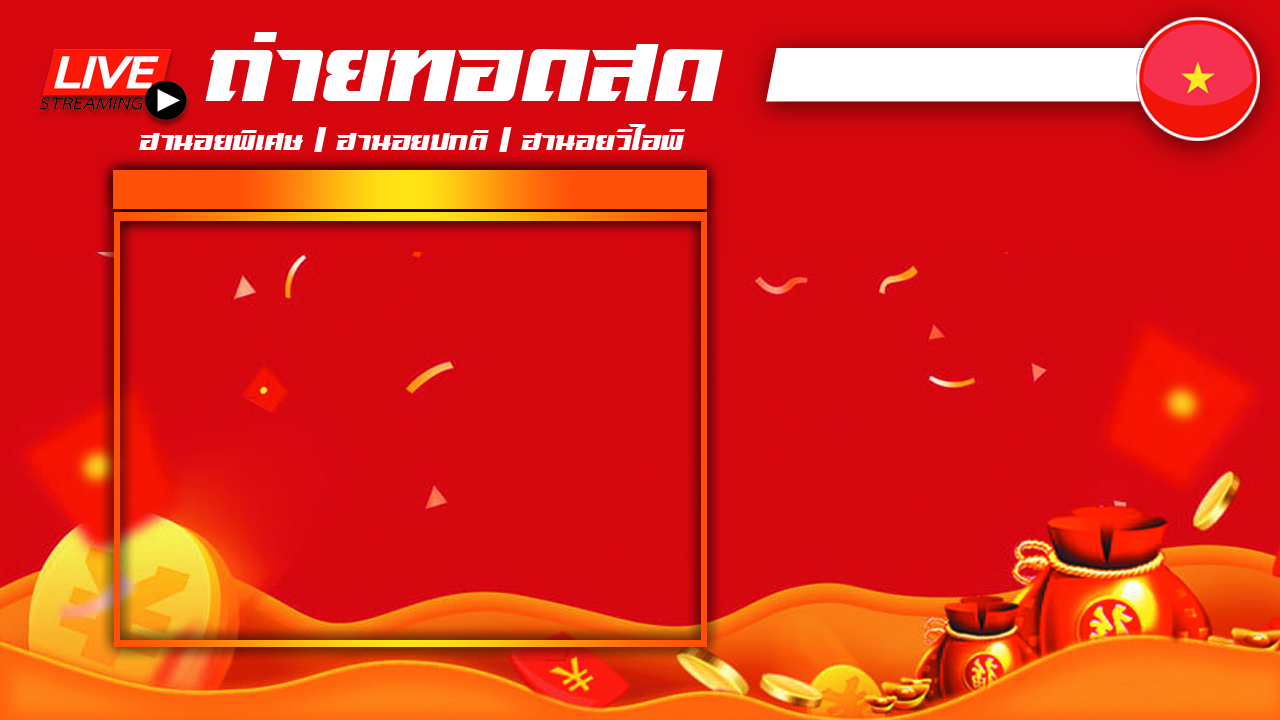
<style>
.page{position:relative;width:1280px;height:720px;background:#d5060e}
.page>*{position:absolute;margin:0}
.t1{font:120px "sdrangverV.1-Regular";color:#ffffff}
.t2{font:35px "sdrangverV.1-Regular";color:#ffffff}
</style>
<div class="page">
<p class="t1" style="left:205px;top:32px;width:518px;height:69px">ถ่ายทอดสด</p>
<p class="t2" style="left:139px;top:124px;width:546px;height:28px">ฮานอยพิเศษ / ฮานอยปกติ / ฮานอยวีไอพี</p>
</div>
